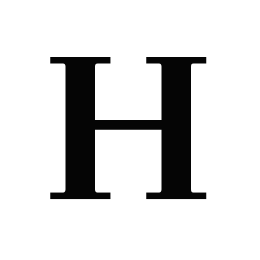
<style>
.page{position:relative;width:260px;height:260px;background:#ffffff}
.page>*{position:absolute;margin:0}
.t1{font:205.8px "JannonTModerneOT-Bold";letter-spacing:0.1em;color:#050505}
</style>
<div class="page">
<p class="t1" style="left:50px;top:57px;width:157px;height:143px">H</p>
</div>
